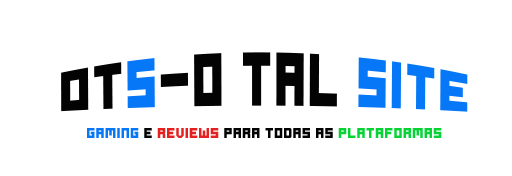
<style>
.page{position:relative;width:512px;height:176px;background:#ffffff}
.page>*{position:absolute;margin:0}
.t1{font:36px "Ode-to-Idle-Gaming";letter-spacing:0.05em;color:#030303}
.t2{font:36px "Ode-to-Idle-Gaming";letter-spacing:0.05em;color:#0677f6}
.t3{font:10px "Ode-to-Idle-Gaming";letter-spacing:0.05em;color:#030303}
.t4{font:10px "Ode-to-Idle-Gaming";letter-spacing:0.05em;color:#0677f6}
.t5{font:10px "Ode-to-Idle-Gaming";letter-spacing:0.05em;color:#e52020}
.t6{font:10px "Ode-to-Idle-Gaming";letter-spacing:0.05em;color:#07d337}
</style>
<div class="page">
<p class="t1" style="left:61px;top:52px;width:407px;height:60px">OT<span class="t2">S</span>-O TAL <span class="t2">SITE</span></p>
<p class="t3" style="left:87px;top:128px;width:355px;height:10px"><span class="t4">Gaming</span> e <span class="t5">reviews</span> para todas as <span class="t6">plataformas</span></p>
</div>
